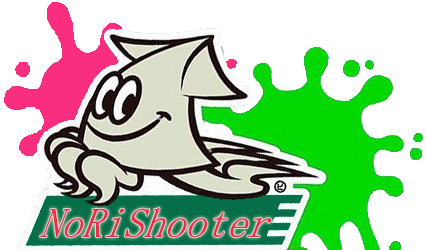
<style>
.page{position:relative;width:426px;height:250px;background:#ffffff}
.page>*{position:absolute;margin:0}
.t1{font:44.2px "SimSun";color:#ee2d44;scale:0.94 1}
</style>
<div class="page">
<p class="t1" style="left:39px;top:207px;width:233px;height:31px">NoRiShooter</p>
</div>
